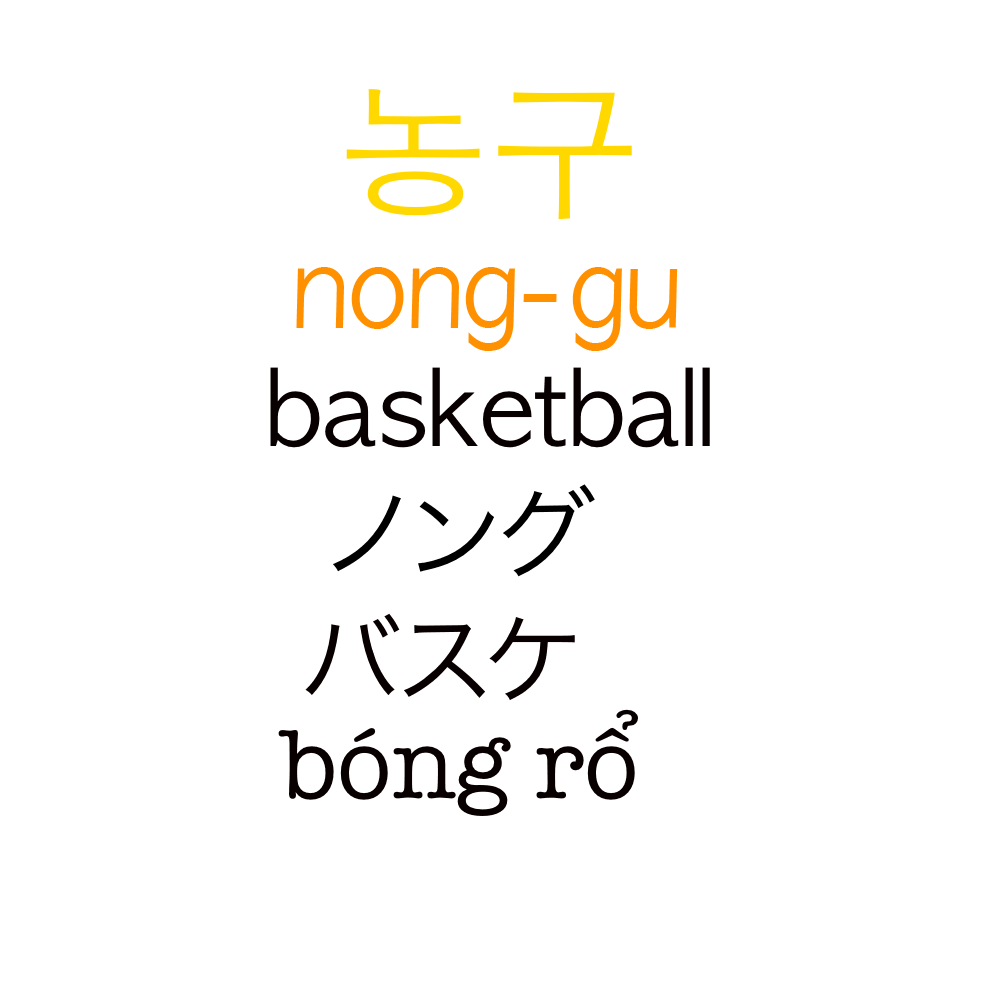
<style>
.page{position:relative;width:1000px;height:1000px;background:#ffffff}
.page>*{position:absolute;margin:0}
.t1{font:150px "AppleGothic";color:#ffd800}
.t2{font:111.2px "AppleGothic";color:#ff9000;scale:0.9 1}
.t3{font:100px "AppleGothic";color:#080000}
.t4{font:100px "HiraKakuProN-W3";color:#000000}
.t5{font:100px "HiraKakuProN-W3";color:#080000}
.t6{font:100px "AmericanTypewriter";color:#080000}
</style>
<div class="page">
<p class="t1" style="left:346px;top:89px;width:286px;height:131px">농구</p>
<p class="t2" style="left:296px;top:267px;width:382px;height:84px">nong-gu</p>
<p class="t3" style="left:270px;top:367px;width:440px;height:81px">basketball</p>
<p class="t4" style="left:333px;top:484px;width:262px;height:93px">ノング</p>
<p class="t5" style="left:305px;top:613px;width:270px;height:87px">バスケ</p>
<p class="t6" style="left:278px;top:709px;width:360px;height:107px">bóng rổ</p>
</div>
